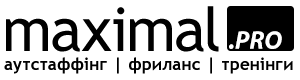
<style>
.page{position:relative;width:300px;height:80px;background:#ffffff}
.page>*{position:absolute;margin:0}
.t1{font:60.7px "TrebuchetMS";color:#000000}
.t2{font:25.5px "MyriadPro-BoldIt";color:#ffffff}
.t3{font:17px "TrebuchetMS-Bold";letter-spacing:0.01em;color:#000000}
</style>
<div class="page">
<p class="t1" style="left:6px;top:6px;width:213px;height:46px">maximal</p>
<p class="t2" style="left:229px;top:31px;width:53px;height:18px">.PRO</p>
<p class="t3" style="left:4px;top:57px;width:289px;height:17px">аутстаффінг | фриланс | тренінги</p>
</div>
